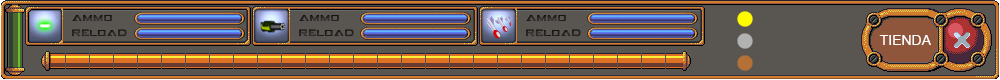
<style>
.page{position:relative;width:1000px;height:80px;background:#595652}
.page>*{position:absolute;margin:0}
.t1{font:8px "GAMECUBENDualSet";color:#272624}
.t2{font:8px "GAMECUBENDualSet";color:#242321}
.t3{font:14px "ArialMT";color:#ffffff}
</style>
<div class="page">
<p class="t1" style="left:72px;top:15px;width:40px;height:6px">AMMO</p>
<p class="t1" style="left:299px;top:15px;width:40px;height:6px">AMMO</p>
<p class="t1" style="left:526px;top:15px;width:40px;height:6px">AMMO</p>
<p class="t2" style="left:72px;top:29px;width:55px;height:8px">RELOAD</p>
<p class="t2" style="left:299px;top:29px;width:55px;height:8px">RELOAD</p>
<p class="t2" style="left:526px;top:29px;width:55px;height:8px">RELOAD</p>
<p class="t3" style="left:879px;top:35px;width:52px;height:10px">TIENDA</p>
</div>
